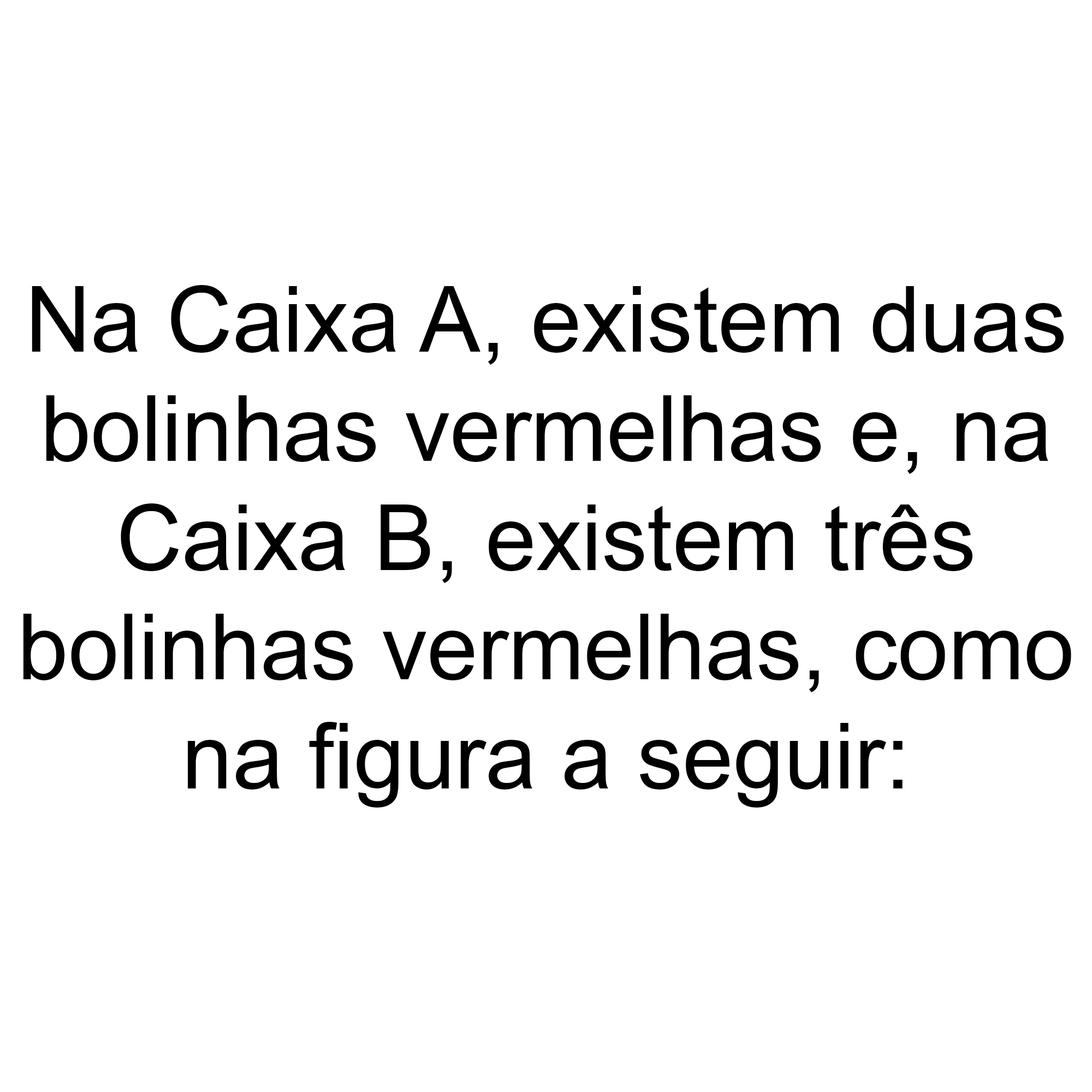
<style>
.page{position:relative;width:1092px;height:1092px;background:#ffffff}
.page>*{position:absolute;margin:0}
.t1{font:91px "ArialMT";color:#000000}
</style>
<div class="page">
<p class="t1" style="left:23px;top:285px;width:1048px;height:523px;text-align:center">Na Caixa A, existem duas<br>bolinhas vermelhas e, na<br>Caixa B, existem três<br>bolinhas vermelhas, como<br>na figura a seguir:</p>
</div>
